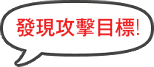
<style>
.page{position:relative;width:154px;height:67px;background:#ffffff}
.page>*{position:absolute;margin:0}
.t1{font:20px "GothicMB101Pr6N-Medium";color:#ef2021}
.t2{font:20px "GothicMB101Pr6N-Light";color:#ef2021}
</style>
<div class="page">
<p class="t1" style="left:16px;top:17px;width:123px;height:20px">發現攻擊目標<span class="t2">!</span></p>
</div>
